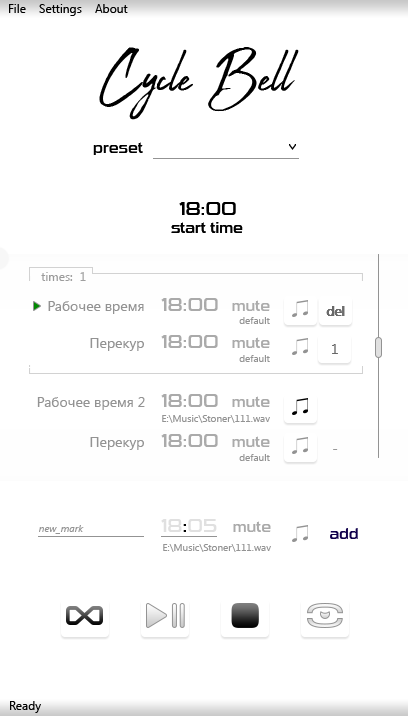
<style>
.page{position:relative;width:408px;height:716px;background:#ffffff}
.page>*{position:absolute;margin:0}
.t1{font:12px "SegoeUI";color:#000000}
.t2{font:74px "Abuget";color:#000000}
.t3{font:14px "SuiGenerisRg-Regular";color:#000000}
.t4{font:18px "SuiGenerisRg-Regular";color:#000000}
.t5{font:12px "SegoeUI";color:#9b9b9b}
.t6{font:12px "SegoeUI";color:#9f9f9f}
.t7{font:14px "SegoeUI";color:#939393}
.t8{font:18px "SuiGenerisRg-Regular";color:#aaaaaa}
.t9{font:14px "SuiGenerisRg-Regular";color:#acacac}
.t10{font:10px "SegoeUI";color:#939393}
.t11{font:14px "SegoeUI";color:#686868}
.t12{font:14px "SuiGenerisRg-Regular";color:#aaaaaa}
.t13{font:14px "SegoeUI";color:#989898}
.t14{font:18px "SuiGenerisRg-Regular";color:#e0e0e0}
.t15{font:10px "SegoeUI-Italic";color:#939393}
.t16{font:14px "SuiGenerisRg-Regular";color:#11004c}
</style>
<div class="page">
<p class="t1" style="left:9px;top:4px;width:119px;height:12px">File    Settings    About</p>
<p class="t2" style="left:99px;top:47px;width:200px;height:73px">Cycle Bell</p>
<p class="t3" style="left:93px;top:142px;width:50px;height:13px">preset</p>
<p class="t4" style="left:179px;top:202px;width:57px;height:13px">18:00</p>
<p class="t4" style="left:179px;top:202px;width:57px;height:13px">18:00</p>
<p class="t3" style="left:171px;top:222px;width:72px;height:11px">start time</p>
<p class="t3" style="left:171px;top:222px;width:72px;height:11px">start time</p>
<p class="t5" style="left:41px;top:272px;width:32px;height:9px">times:</p>
<p class="t6" style="left:80px;top:272px;width:6px;height:9px">1</p>
<p class="t7" style="left:48px;top:301px;width:96px;height:13px">Рабочее время</p>
<p class="t8" style="left:161px;top:298px;width:57px;height:13px">18:00</p>
<p class="t9" style="left:232px;top:300px;width:38px;height:11px">mute</p>
<p class="t10" style="left:239px;top:317px;width:31px;height:7px">default</p>
<p class="t11" style="left:326px;top:306px;width:18px;height:10px">del</p>
<p class="t11" style="left:327px;top:306px;width:18px;height:10px">del</p>
<p class="t7" style="left:90px;top:338px;width:54px;height:13px">Перекур</p>
<p class="t8" style="left:161px;top:335px;width:57px;height:13px">18:00</p>
<p class="t12" style="left:232px;top:337px;width:38px;height:11px">mute</p>
<p class="t11" style="left:332px;top:344px;width:6px;height:10px">1</p>
<p class="t10" style="left:239px;top:355px;width:31px;height:7px">default</p>
<p class="t7" style="left:37px;top:397px;width:108px;height:13px">Рабочее время 2</p>
<p class="t8" style="left:161px;top:394px;width:57px;height:13px">18:00</p>
<p class="t12" style="left:232px;top:396px;width:38px;height:11px">mute</p>
<p class="t10" style="left:162px;top:415px;width:108px;height:8px">E:\Music\Stoner\111.wav</p>
<p class="t7" style="left:90px;top:437px;width:54px;height:13px">Перекур</p>
<p class="t8" style="left:161px;top:434px;width:57px;height:13px">18:00</p>
<p class="t12" style="left:232px;top:436px;width:38px;height:11px">mute</p>
<p class="t13" style="left:333px;top:449px;width:5px;height:1px">-</p>
<p class="t10" style="left:239px;top:454px;width:31px;height:7px">default</p>
<p class="t14" style="left:161px;top:519px;width:56px;height:13px">18<span class="t4">:</span>05</p>
<p class="t12" style="left:233px;top:521px;width:38px;height:11px">mute</p>
<p class="t15" style="left:39px;top:525px;width:45px;height:9px">new_mark</p>
<p class="t16" style="left:330px;top:528px;width:28px;height:11px">add</p>
<p class="t10" style="left:163px;top:544px;width:108px;height:8px">E:\Music\Stoner\111.wav</p>
<p class="t1" style="left:10px;top:701px;width:31px;height:12px">Ready</p>
</div>
